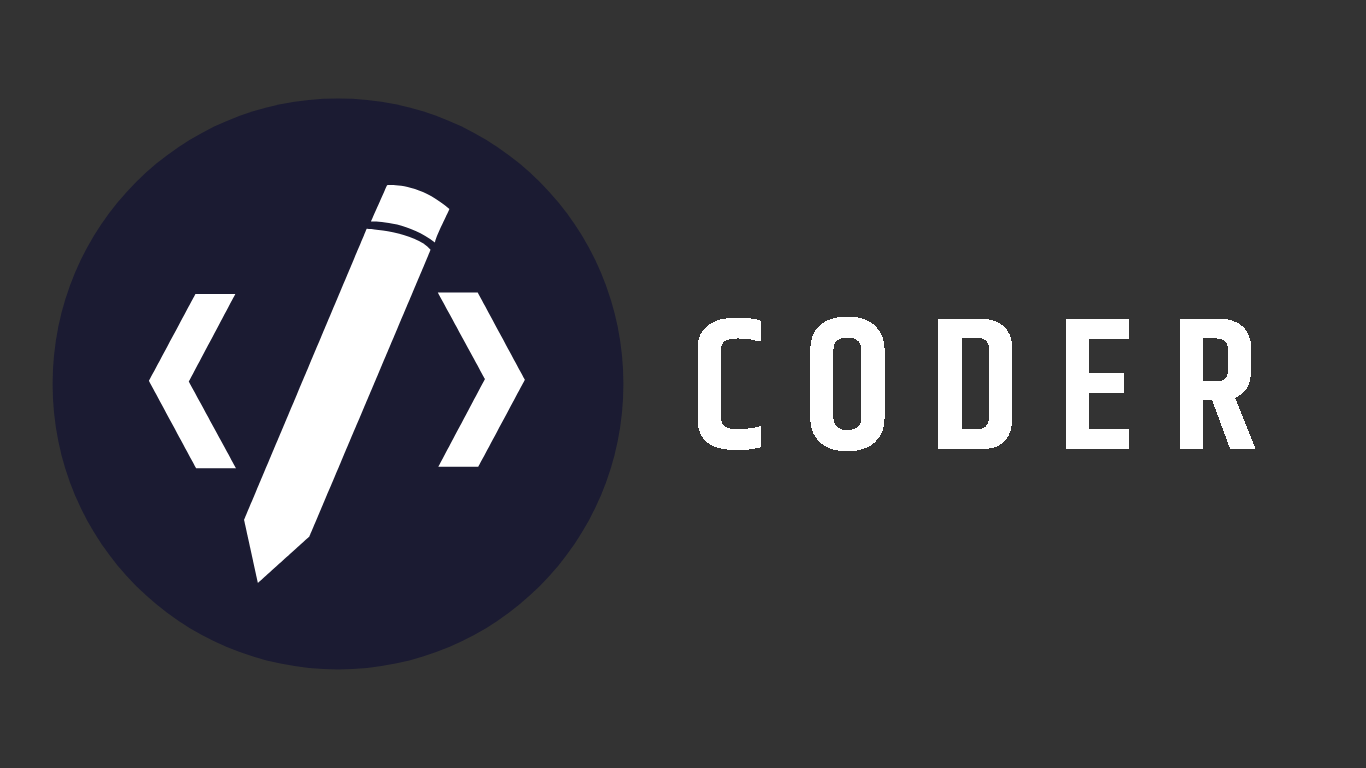
<style>
.page{position:relative;width:1366px;height:768px;background:#333333}
.page>*{position:absolute;margin:0}
.t1{font:190.3px "Khand-SemiBold";color:#ffffff}
</style>
<div class="page">
<p class="t1" style="left:697px;top:316px;width:559px;height:135px">C O D E R</p>
</div>
